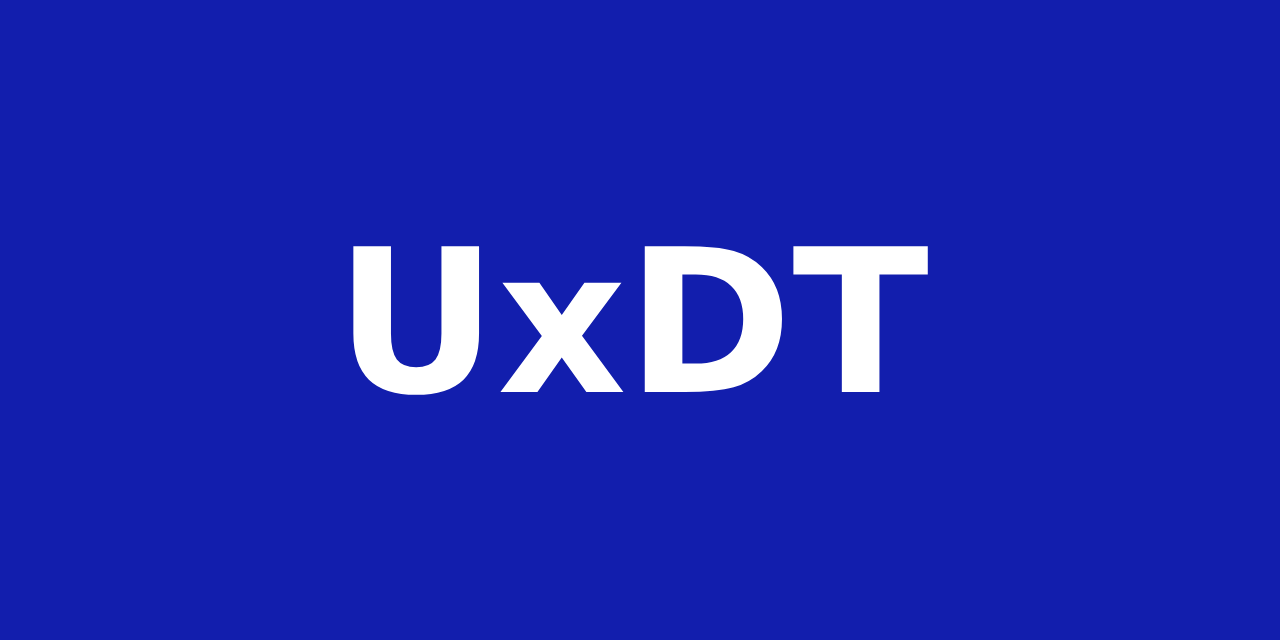
<style>
.page{position:relative;width:1280px;height:640px;background:#121ead}
.page>*{position:absolute;margin:0}
.t1{font:200px "ProximaNova-Bold";color:#ffffff}
</style>
<div class="page">
<p class="t1" style="left:353px;top:246px;width:575px;height:149px">UxDT</p>
</div>
